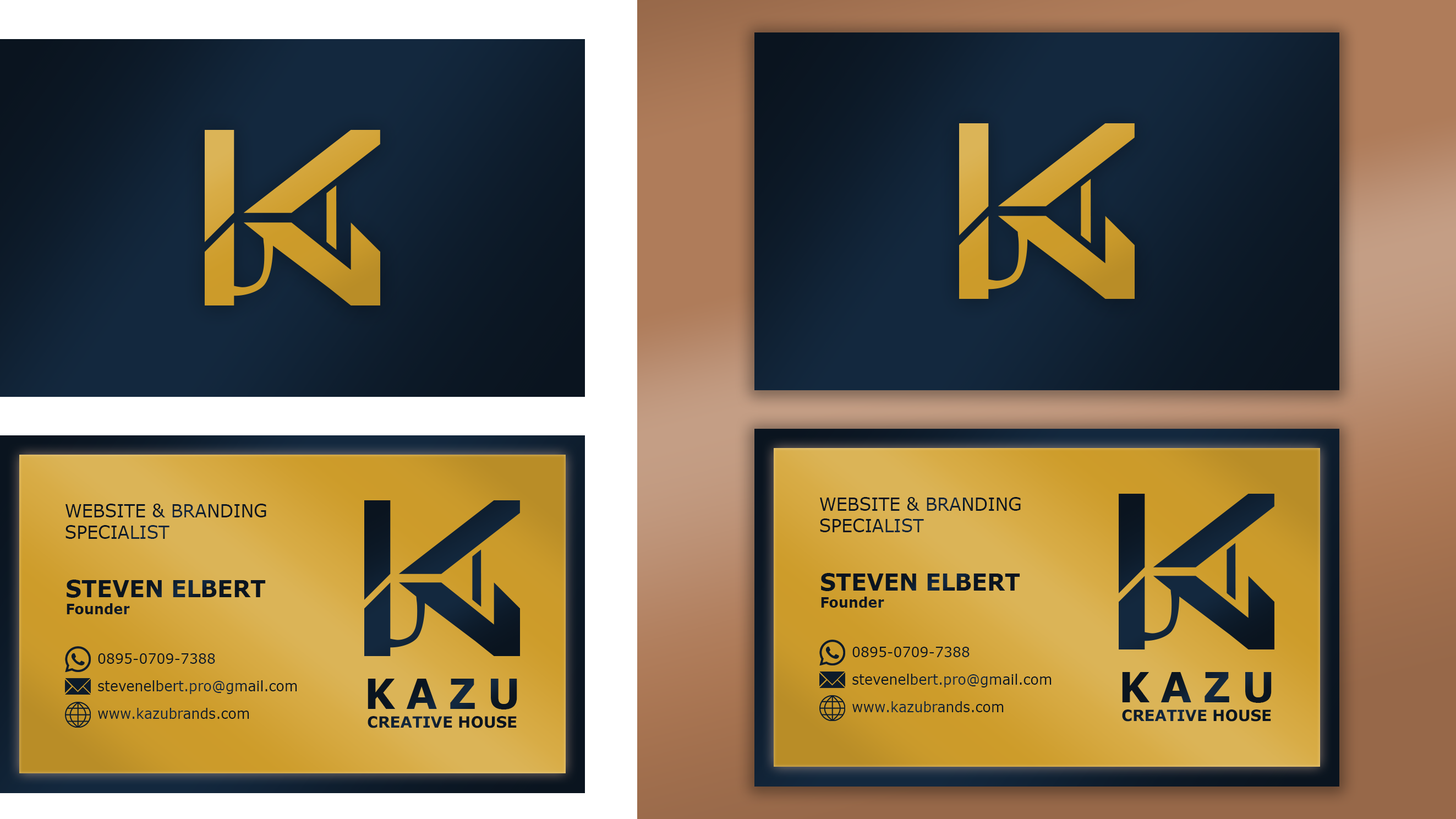
<style>
.page{position:relative;width:1456px;height:819px}
.page>*{position:absolute;margin:0}
.t1{font:17.9px "Verdana";color:#0a141f}
.t2{font:22.9px "Verdana-Bold";color:#0a141f}
.t3{font:14.2px "Verdana-Bold";color:#0a141f}
.t4{font:14.2px/27.5px "Verdana";color:#0c1926}
.t5{font:15.6px "Verdana-Bold";color:#0c1826}
.t6{font:41px "Verdana-Bold";letter-spacing:0.28em;color:#0c1826}
</style>
<div class="page">
<p class="t1" style="left:65px;top:504px;width:201px;height:35px">WEBSITE &amp; BRANDING<br>SPECIALIST</p>
<p class="t2" style="left:67px;top:579px;width:199px;height:35px">STEVEN ELBERT<br><span class="t3">Founder</span></p>
<p class="t4" style="left:98px;top:653px;width:199px;height:66px">0895-0709-7388<br>stevenelbert.pro@gmail.com<br>www.kazubrands.com</p>
<p class="t5" style="left:368px;top:679px;width:149px;height:49px;text-align:center"><span class="t6">KAZU<br></span>CREATIVE HOUSE</p>
</div>
